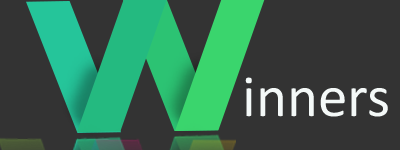
<style>
.page{position:relative;width:400px;height:150px;background:#333333}
.page>*{position:absolute;margin:0}
.t1{font:59.3px "Calibri";color:#f4f9f8}
</style>
<div class="page">
<p class="t1" style="left:245px;top:77px;width:143px;height:40px">inners</p>
</div>
